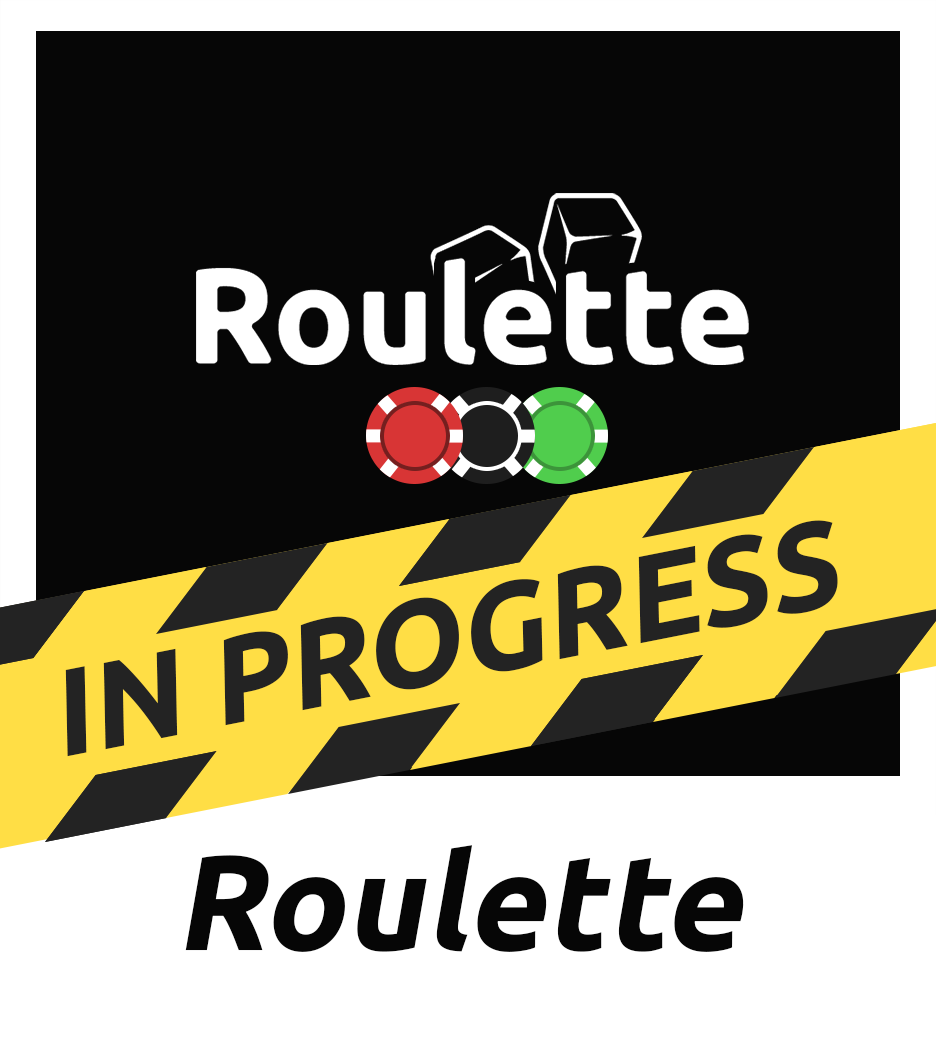
<style>
.page{position:relative;width:936px;height:1058px;background:#060606}
.page>*{position:absolute;margin:0}
.t1{font:122.4px "Ubuntu-Bold";color:#232323;font-style:italic}
.t2{font:135.4px "Ubuntu-Bold";color:#060606;font-style:italic}
</style>
<div class="page">
<p class="t1" style="left:65px;top:520px;width:773px;height:237px;rotate:-11deg">IN PROGRESS</p>
<p class="t2" style="left:185px;top:845px;width:559px;height:107px">Roulette</p>
</div>
